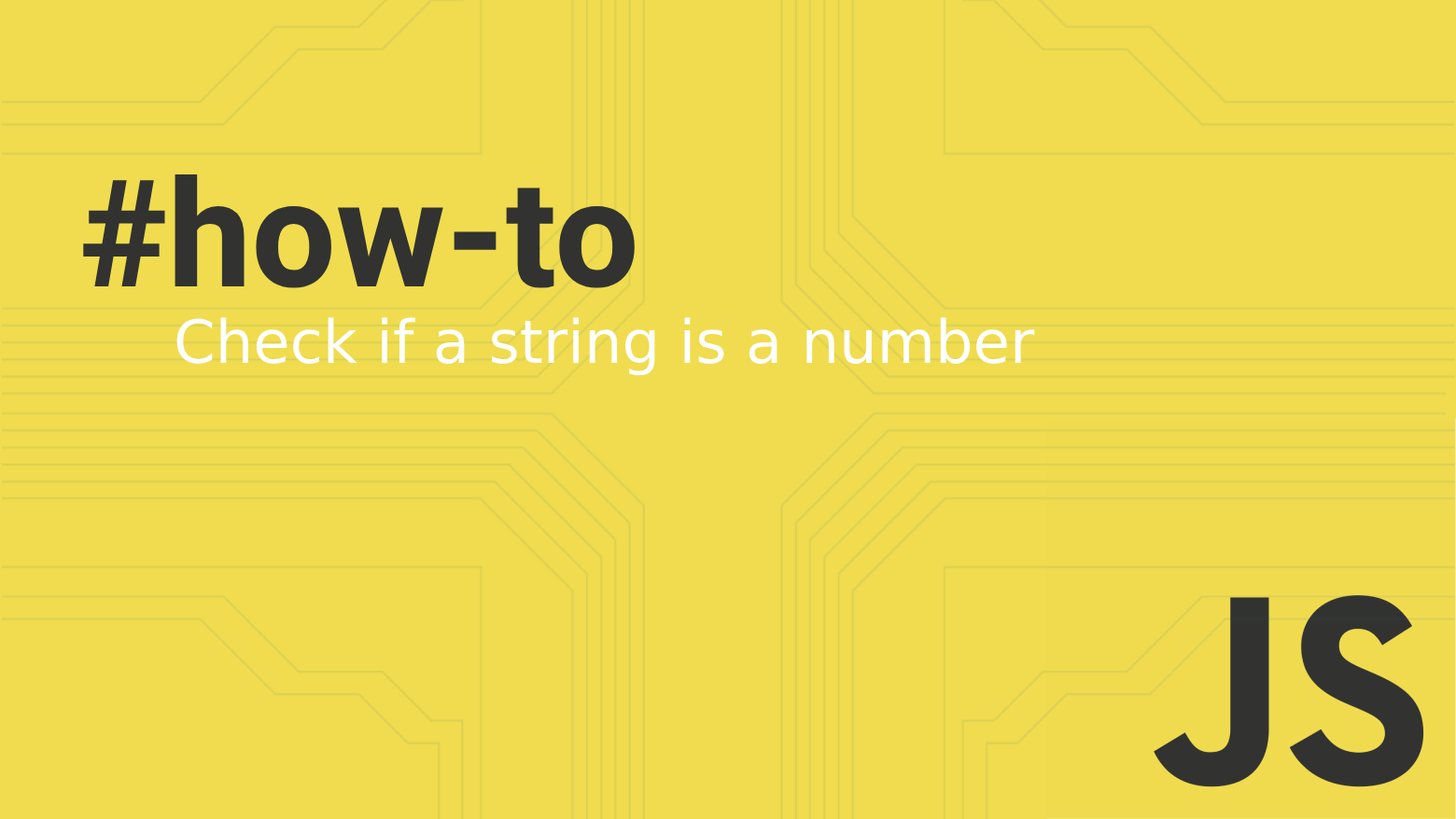
<style>
.page{position:relative;width:1456px;height:819px;background:#f0dc4e}
.page>*{position:absolute;margin:0}
.t1{font:149.3px "Heebo-Bold";color:#323330}
.t2{font:59.7px "DejaVuSans";color:#ffffff}
</style>
<div class="page">
<p class="t1" style="left:83px;top:174px;width:551px;height:114px">#how-to</p>
<p class="t2" style="left:176px;top:317px;width:859px;height:59px">Check if a string is a number</p>
</div>
